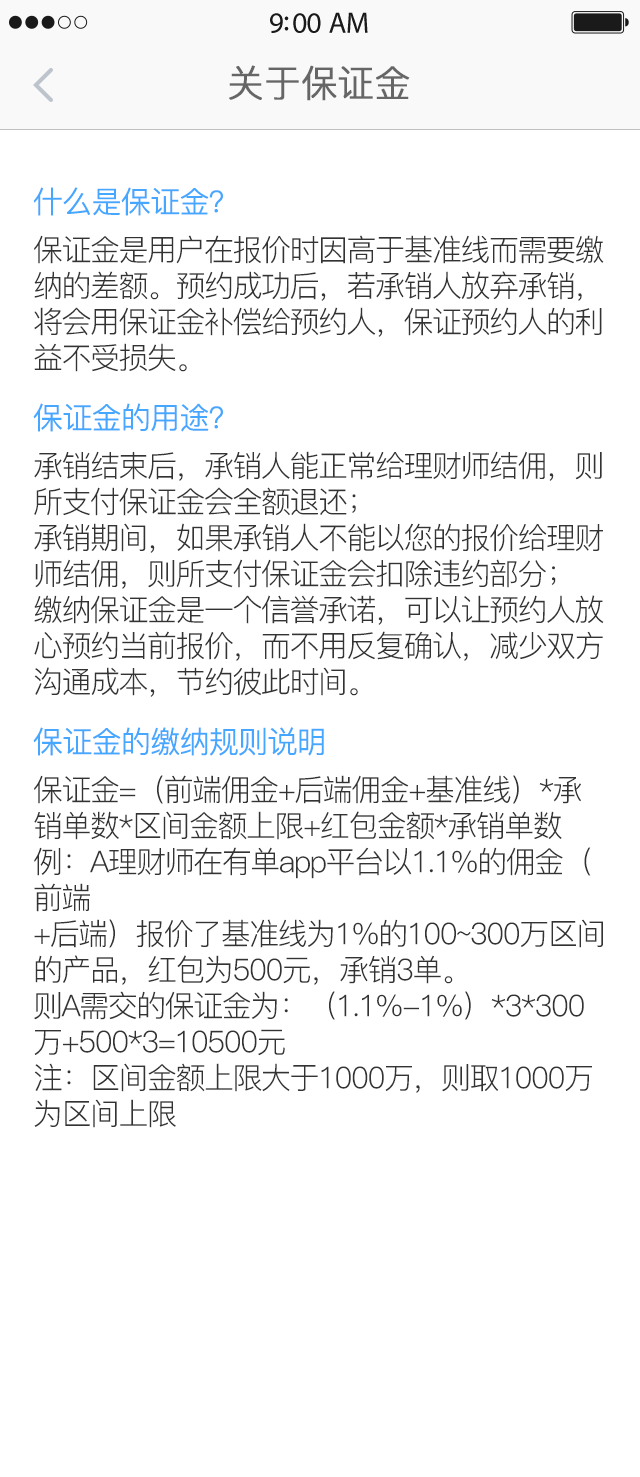
<style>
.page{position:relative;width:640px;height:1477px;background:#ffffff}
.page>*{position:absolute;margin:0}
.t1{font:37.1px "PingFang-SC-Regular";color:#666666;font-weight:bold}
.t2{font:30px "PingFang-SC-Regular";letter-spacing:-0.05em;color:#333333}
.t3{font:30px/24px "PingFang-SC-Regular";letter-spacing:-0.05em;color:#45a7ff;font-weight:bold}
.t4{font:30px/24px "PingFang-SC-Regular";letter-spacing:-0.05em;color:#333333}
</style>
<div class="page">
<p class="t1" style="left:229px;top:65px;width:181px;height:36px">关于保证金</p>
<p class="t2" style="left:33px;top:187px;width:571px;height:941px"><span class="t3">什么是保证金？<br></span><span class="t4"><br>保证金是用户在报价时因高于基准线而需要缴</span>纳的差额。预约成功后，若承销人放弃承销，将会用保证金补偿给预约人，保证预约人的利益不受损失。<br> <br><span class="t3">保证金的用途？<br></span><span class="t4"><br>承销结束后，承销人能正常给理财师结佣，则</span>所支付保证金会全额退还；<br>承销期间，如果承销人不能以您的报价给理财师结佣，则所支付保证金会扣除违约部分；<br>缴纳保证金是一个信誉承诺，可以让预约人放心预约当前报价，而不用反复确认，减少双方沟通成本，节约彼此时间。<br> <br><span class="t3">保证金的缴纳规则说明<br></span><span class="t4"><br>保证金=（前端佣金+后端佣金+基准线）*承</span>销单数*区间金额上限+红包金额*承销单数<br>例：A理财师在有单app平台以1.1%的佣金（前端<br>+后端）报价了基准线为1%的100~300万区间的产品，红包为500元，承销3单。<br>则A需交的保证金为：（1.1%-1%）*3*300万+500*3=10500元<br>注：区间金额上限大于1000万，则取1000万为区间上限</p>
</div>
